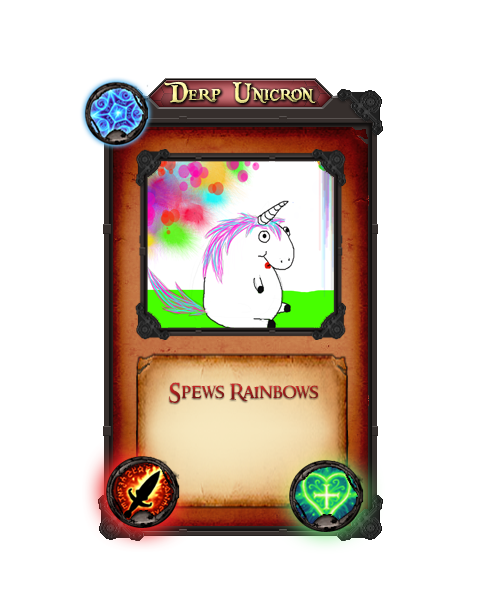
<style>
.page{position:relative;width:500px;height:600px;background:#ffffff}
.page>*{position:absolute;margin:0}
.t1{font:30px "PiecesofEight"}
.t2{font:20px "RingbearerMedium"}
</style>
<div class="page">
<p class="t1" style="left:164px;top:81px;width:152px;height:22px">Derp Unicron</p>
<p class="t2" style="left:169px;top:382px;width:149px;height:21px">Spews Rainbows</p>
</div>
